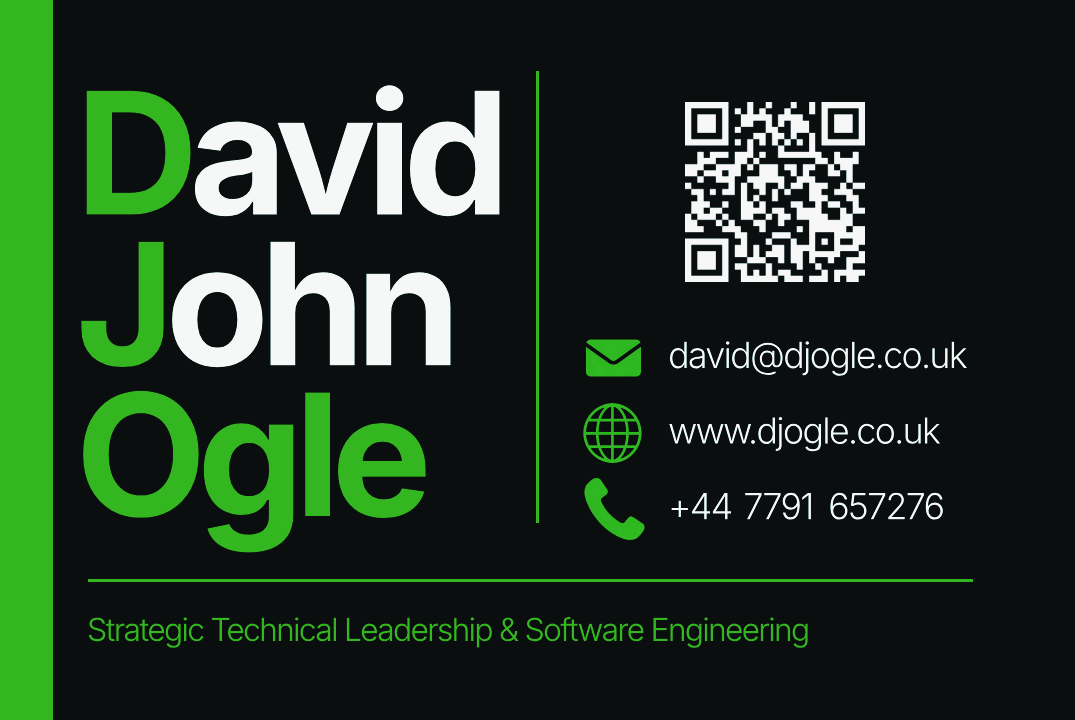
<style>
.page{position:relative;width:1075px;height:720px;background:#0b0e0f}
.page>*{position:absolute;margin:0}
.t1{font:170px "Inter-Regular_18.000opsz_700.000wght";letter-spacing:-0.05em}
.t2{font:36px "Inter-Regular_14.000opsz_300.000wght";letter-spacing:-0.05em;color:#f2f4f3}
.t3{font:32px "Inter-Regular_18.000opsz_350.000wght";letter-spacing:-0.05em;color:#34b621}
</style>
<div class="page">
<p class="t1" style="left:81px;top:85px;width:419px;height:468px">David <br>John <br>Ogle</p>
<p class="t2" style="left:669px;top:341px;width:299px;height:179px">david@djogle.co.uk<br>www.djogle.co.uk<br>+44 7791 657276</p>
<p class="t3" style="left:88px;top:616px;width:720px;height:32px">Strategic Technical Leadership &amp; Software Engineering</p>
</div>
